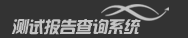
<style>
.page{position:relative;width:188px;height:38px;background:#333333}
.page>*{position:absolute;margin:0}
.t1{font:16px "FZHZGBJW--GB1-0";color:#c3c3c3;font-style:italic}
</style>
<div class="page">
<p class="t1" style="left:11px;top:19px;width:130px;height:16px">测试报告查询系统</p>
</div>
